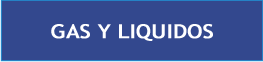
<style>
.page{position:relative;width:263px;height:62px;background:#33488e}
.page>*{position:absolute;margin:0}
.t1{font:19.4px "TrebuchetMS";color:#ffffff;font-weight:bold;scale:1.14 1}
</style>
<div class="page">
<p class="t1" style="left:51px;top:24px;width:162px;height:17px">GAS Y LIQUIDOS</p>
</div>
